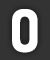
<style>
.page{position:relative;width:50px;height:60px;background:#333333}
.page>*{position:absolute;margin:0}
.t1{font:60px "Bahnschrift-Bold";color:#ffffff}
</style>
<div class="page">
<p class="t1" style="left:12px;top:9px;width:26px;height:44px">0</p>
</div>
